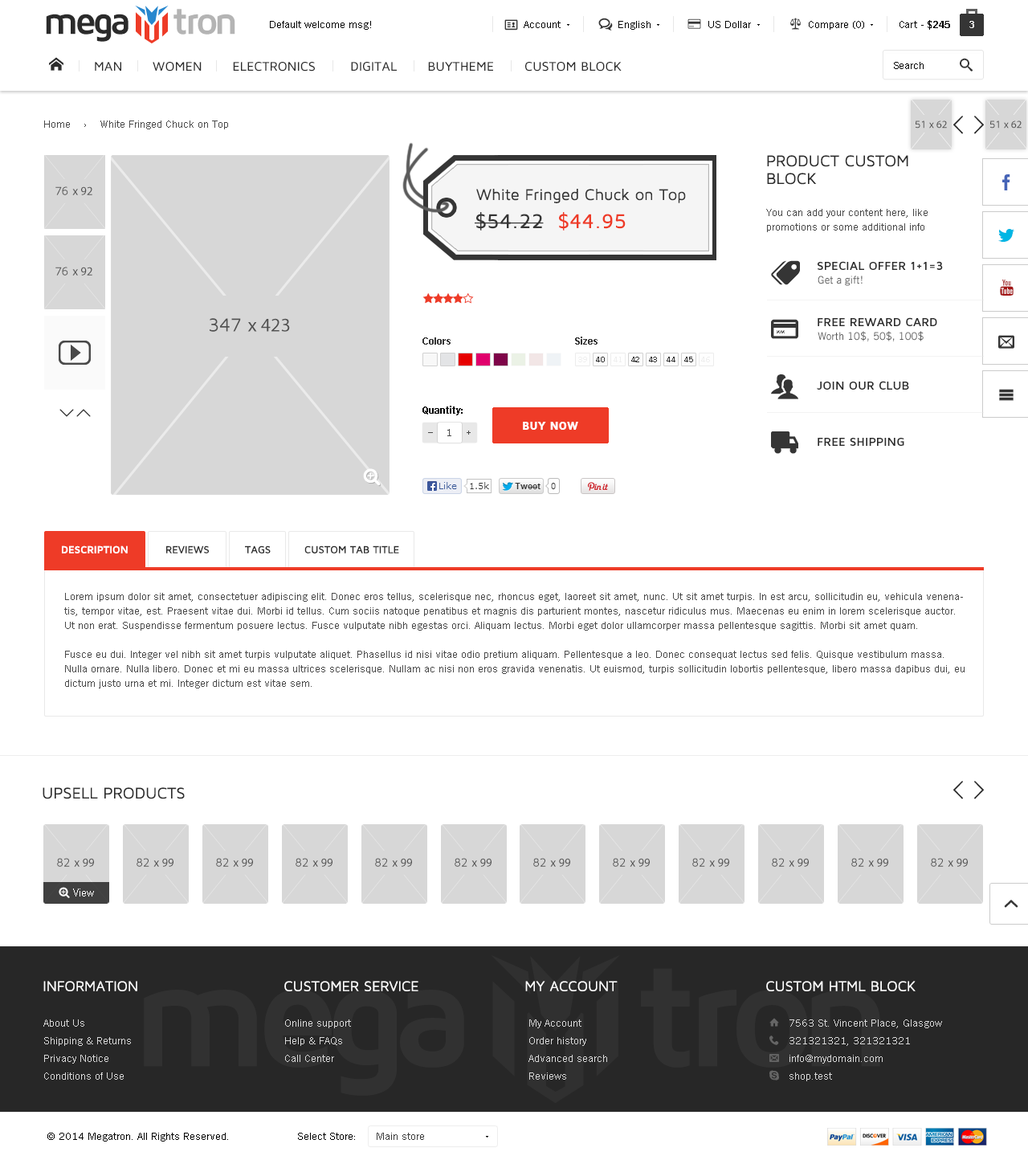
<style>
.page{position:relative;width:1028px;height:1160px;background:#ffffff}
.page>*{position:absolute;margin:0}
.t1{font:38.6px "MavenProBold";letter-spacing:-0.1em;color:#2b2b2b}
.t2{font:38.6px "MavenProBold";letter-spacing:-0.1em;color:#b4b4b4}
.t3{font:10.4px "TradeGothicW01-Roman";color:#000000}
.t4{font:10.4px "TradeGothicW01-Bold2";color:#000000}
.t5{font:9.6px "TradeGothicW01-Bold2";color:#ffffff}
.t6{font:10.4px "TradeGothicW01-Roman";color:#494949}
.t7{font:16.1px/17.7px "MavenProRegular";color:#2b2b2b;text-transform:uppercase}
.t8{font:16.1px "MavenProRegular";color:#353535}
.t9{font:10.4px/14.5px "TradeGothicW01-Roman";color:#494949}
.t10{font:20.9px "MavenProMedium";color:#353535}
.t11{font:20.9px "MavenProMedium";color:#ee3b27}
.t12{font:12px "MavenProBold";color:#2b2b2b;text-transform:uppercase}
.t13{font:10.4px "TradeGothicW01-Roman";color:#5b5b5b}
.t14{font:10.4px "TradeGothicW01-Bold2";color:#353535}
.t15{font:8px "TradeGothicW01-Roman";color:#efefef;text-transform:uppercase}
.t16{font:8px "TradeGothicW01-Roman";color:#353535;text-transform:uppercase}
.t17{font:11.2px "MavenProBlack";color:#ffffff}
.t18{font:8.8px "TradeGothicW01-Bold2";color:#494949}
.t19{font:10.4px "MavenProBold";color:#ffffff;text-transform:uppercase}
.t20{font:10.4px "MavenProMedium";color:#2b2b2b;text-transform:uppercase}
.t21{font:16.1px "MavenProRegular";color:#2b2b2b;text-transform:uppercase}
.t22{font:11.2px "TradeGothicW01-Roman";color:#ffffff}
.t23{font:14.5px "MavenProRegular";color:#ffffff;text-transform:uppercase}
.t24{font:10.4px/17.7px "TradeGothicW01-Roman";color:#d9d9d9}
.t25{font:10.4px "TradeGothicW01-Roman";color:#3c3c3c}
</style>
<div class="page">
<p class="t1" style="left:46px;top:9px;width:189px;height:33px">mega     <span class="t2">tron</span></p>
<p class="t3" style="left:270px;top:21px;width:101px;height:9px">Default welcome msg!</p>
<p class="t3" style="left:524px;top:21px;width:37px;height:7px">Account</p>
<p class="t3" style="left:618px;top:21px;width:33px;height:9px">English</p>
<p class="t3" style="left:708px;top:21px;width:43px;height:7px">US Dollar</p>
<p class="t3" style="left:809px;top:21px;width:55px;height:9px">Compare (0)</p>
<p class="t3" style="left:900px;top:20px;width:50px;height:10px">Cart - <span class="t4">$245</span></p>
<p class="t5" style="left:969px;top:21px;width:5px;height:7px">3</p>
<p class="t3" style="left:894px;top:62px;width:30px;height:7px">Search</p>
<p class="t6" style="left:44px;top:120px;width:184px;height:9px">Home    ›    White Fringed Chuck on Top</p>
<p class="t7" style="left:767px;top:155px;width:141px;height:30px">PRODUCT CUSTOM <br>BLOCK</p>
<p class="t8" style="left:476px;top:189px;width:210px;height:14px">White Fringed Chuck on Top</p>
<p class="t9" style="left:766px;top:209px;width:162px;height:23px">You can add your content here, like <br>promotions or some additional info</p>
<p class="t10" style="left:475px;top:212px;width:151px;height:19px">$54.22  <span class="t11">$44.95</span></p>
<p class="t12" style="left:818px;top:261px;width:125px;height:9px">Special Offer 1+1=3</p>
<p class="t13" style="left:818px;top:276px;width:45px;height:10px">Get a gift!</p>
<p class="t12" style="left:818px;top:317px;width:119px;height:9px">FREE REWARD CARD</p>
<p class="t14" style="left:422px;top:337px;width:29px;height:8px">Colors</p>
<p class="t14" style="left:575px;top:337px;width:23px;height:8px">Sizes</p>
<p class="t13" style="left:818px;top:331px;width:106px;height:10px">Worth 10$, 50$, 100$</p>
<p class="t15" style="left:578px;top:357px;width:9px;height:5px">39</p>
<p class="t16" style="left:596px;top:357px;width:9px;height:5px">40</p>
<p class="t15" style="left:614px;top:357px;width:8px;height:5px">41</p>
<p class="t16" style="left:631px;top:357px;width:8px;height:5px">42</p>
<p class="t16" style="left:649px;top:357px;width:8px;height:5px">43</p>
<p class="t16" style="left:667px;top:357px;width:8px;height:5px">44</p>
<p class="t16" style="left:684px;top:357px;width:9px;height:5px">45</p>
<p class="t15" style="left:701px;top:357px;width:9px;height:5px">46</p>
<p class="t12" style="left:817px;top:381px;width:92px;height:9px">Join Our Club</p>
<p class="t4" style="left:422px;top:406px;width:41px;height:9px">Quantity:</p>
<p class="t17" style="left:523px;top:422px;width:55px;height:8px">BUY NOW</p>
<p class="t6" style="left:447px;top:429px;width:4px;height:7px">1</p>
<p class="t18" style="left:467px;top:431px;width:4px;height:4px">+</p>
<p class="t12" style="left:818px;top:438px;width:86px;height:8px">Free Shipping</p>
<p class="t19" style="left:62px;top:545px;width:66px;height:8px">Description</p>
<p class="t20" style="left:166px;top:545px;width:44px;height:8px">Reviews</p>
<p class="t20" style="left:245px;top:545px;width:26px;height:8px">Tags</p>
<p class="t20" style="left:304px;top:545px;width:95px;height:8px">Custom tab title</p>
<p class="t9" style="left:64px;top:593px;width:901px;height:95px">Lorem ipsum dolor sit amet, consectetuer adipiscing elit. Donec eros tellus, scelerisque nec, rhoncus eget, laoreet sit amet, nunc. Ut sit amet turpis. In est arcu, sollicitudin eu, vehicula venenatis, tempor vitae, est. Praesent vitae dui. Morbi id tellus. Cum sociis natoque penatibus et magnis dis parturient montes, nascetur ridiculus mus. Maecenas eu enim in lorem scelerisque auctor. Ut non erat. Suspendisse fermentum posuere lectus. Fusce vulputate nibh egestas orci. Aliquam lectus. Morbi eget dolor ullamcorper massa pellentesque sagittis. Morbi sit amet quam. <br><br>Fusce eu dui. Integer vel nibh sit amet turpis vulputate aliquet. Phasellus id nisi vitae odio pretium aliquam. Pellentesque a leo. Donec consequat lectus sed felis. Quisque vestibulum massa. Nulla ornare. Nulla libero. Donec et mi eu massa ultrices scelerisque. Nullam ac nisi non eros gravida venenatis. Ut euismod, turpis sollicitudin lobortis pellentesque, libero massa dapibus dui, eu dictum justo urna et mi. Integer dictum est vitae sem.</p>
<p class="t21" style="left:43px;top:787px;width:142px;height:12px">UPSELL PRODUCTS</p>
<p class="t22" style="left:73px;top:888px;width:21px;height:8px">View</p>
<p class="t23" style="left:43px;top:981px;width:94px;height:10px">Information</p>
<p class="t23" style="left:284px;top:981px;width:134px;height:10px">customer service</p>
<p class="t23" style="left:525px;top:981px;width:93px;height:10px">My account</p>
<p class="t23" style="left:766px;top:981px;width:150px;height:10px">CUSTOM HTML BLOCK</p>
<p class="t24" style="left:43px;top:1019px;width:88px;height:61px">About Us<br>Shipping &amp; Returns<br>Privacy Notice<br>Conditions of Use</p>
<p class="t24" style="left:285px;top:1019px;width:66px;height:43px">Online support<br>Help &amp; FAQs<br>Call Center</p>
<p class="t24" style="left:529px;top:1019px;width:78px;height:61px">My Account<br>Order history<br>Advanced search<br>Reviews</p>
<p class="t24" style="left:790px;top:1019px;width:152px;height:62px">7563 St. Vincent Place, Glasgow<br>321321321, 321321321<br>info@mydomain.com<br>shop.test</p>
<p class="t3" style="left:47px;top:1133px;width:181px;height:8px">© 2014 Megatron. All Rights Reserved.</p>
<p class="t3" style="left:298px;top:1133px;width:57px;height:7px">Select Store:</p>
<p class="t25" style="left:377px;top:1133px;width:47px;height:7px">Main store</p>
</div>
